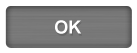
<style>
.page{position:relative;width:137px;height:53px;background:#ffffff}
.page>*{position:absolute;margin:0}
.t1{font:18px "Arial-BoldMT";color:#ffffff}
</style>
<div class="page">
<p class="t1" style="left:55px;top:20px;width:26px;height:14px">OK</p>
</div>
